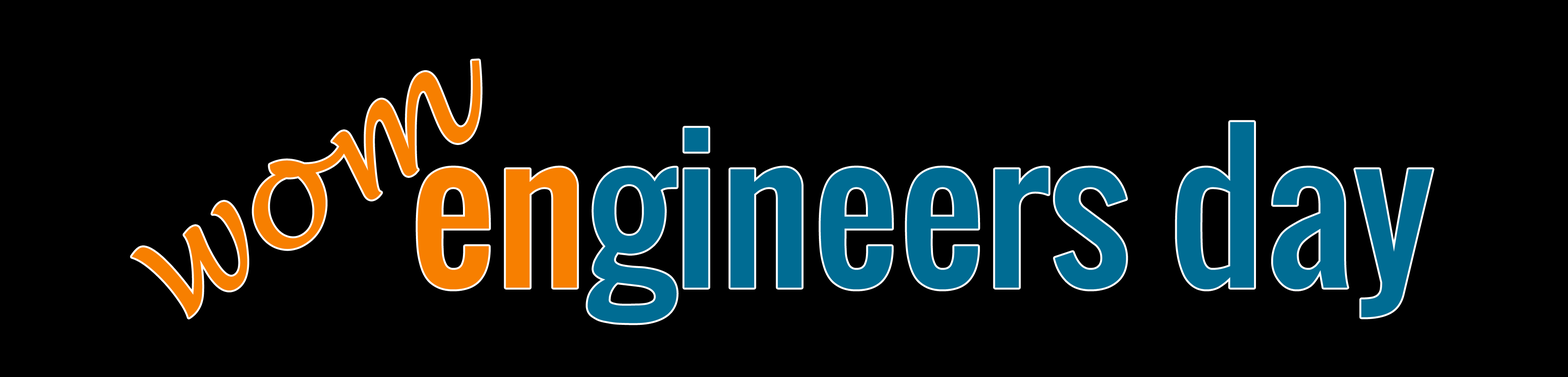
<style>
.page{position:relative;width:1568px;height:377px;background:#000000}
.page>*{position:absolute;margin:0}
.t1{font:145.9px "LucidaHandwriting-Italic";color:#f77f00}
.t2{font:189.5px "Oswald-Regular";color:#006c93}
.t3{font:189.5px "Oswald-Regular";color:#f77f00}
</style>
<div class="page">
<p class="t1" style="left:132px;top:60px;width:349px;height:258px;rotate:-33deg">wom</p>
<p class="t2" style="left:417px;top:122px;width:1015px;height:201px"><span class="t3">en</span>gineers day</p>
</div>
